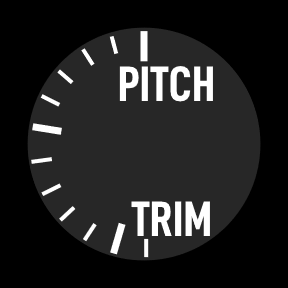
<style>
.page{position:relative;width:288px;height:288px;background:#000000}
.page>*{position:absolute;margin:0}
.t1{font:50px "D-DINCondensed-Bold";color:#ffffff}
</style>
<div class="page">
<p class="t1" style="left:119px;top:65px;width:94px;height:37px">PITCH</p>
<p class="t1" style="left:131px;top:201px;width:79px;height:35px">TRIM</p>
</div>
